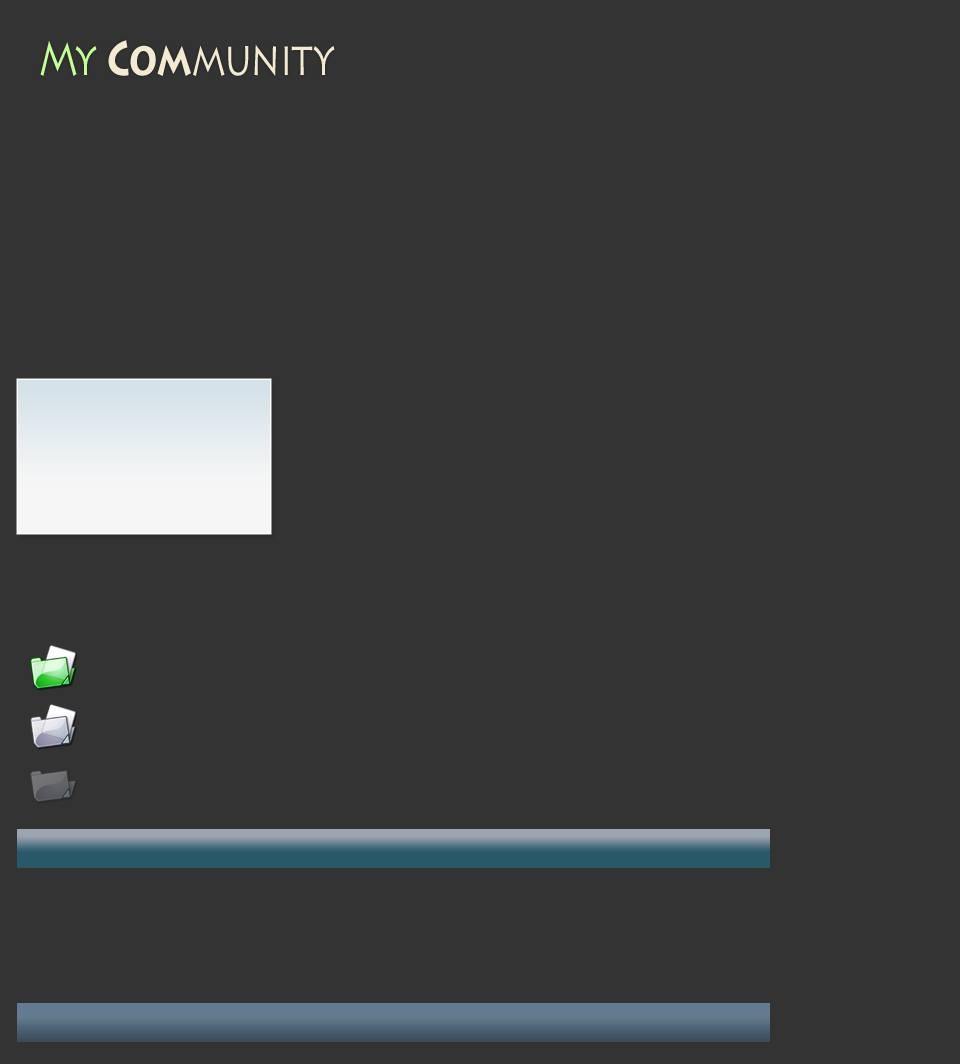
<style>
.page{position:relative;width:960px;height:1064px;background:#333333}
.page>*{position:absolute;margin:0}
.t1{font:48px "LithosPro-Regular";color:#f4ead1;scale:0.74 1}
.t2{font:48px "LithosPro-Regular";color:#c4ff95;scale:0.74 1}
.t3{font:48px "LithosPro-Bold";color:#f4ead1;scale:0.74 1}
</style>
<div class="page">
<p class="t1" style="left:40px;top:40px;width:295px;height:36px"><span class="t2">My </span><span class="t3">Com</span>munity</p>
</div>
